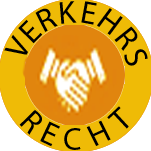
<style>
.page{position:relative;width:151px;height:151px;background:#efbb06}
.page>*{position:absolute;margin:0}
.t1{font:32px "MyriadPro-Regular";color:#000000}
.t2{font:31.2px "MyriadPro-Regular";color:#000000}
</style>
<div class="page">
<p class="t1" style="left:59px;top:1px;width:18px;height:23px;rotate:-5deg">K</p>
<p class="t1" style="left:81px;top:1px;width:16px;height:24px;rotate:10deg">E</p>
<p class="t1" style="left:35px;top:8px;width:23px;height:24px;rotate:-27deg">R</p>
<p class="t1" style="left:97px;top:8px;width:26px;height:27px;rotate:37deg">H</p>
<p class="t1" style="left:18px;top:19px;width:25px;height:25px;rotate:-46deg">E</p>
<p class="t1" style="left:114px;top:26px;width:24px;height:25px;rotate:51deg">R</p>
<p class="t1" style="left:4px;top:34px;width:24px;height:21px;rotate:-61deg">V</p>
<p class="t1" style="left:124px;top:49px;width:24px;height:17px;rotate:68deg">S</p>
<p class="t1" style="left:19px;top:109px;width:23px;height:26px;rotate:46deg">R</p>
<p class="t1" style="left:107px;top:106px;width:22px;height:23px;rotate:-43deg">T</p>
<p class="t1" style="left:40px;top:121px;width:20px;height:26px;rotate:25deg">E</p>
<p class="t2" style="left:86px;top:120px;width:25px;height:26px;rotate:-24deg">H</p>
<p class="t1" style="left:64px;top:128px;width:17px;height:22px">C</p>
</div>
